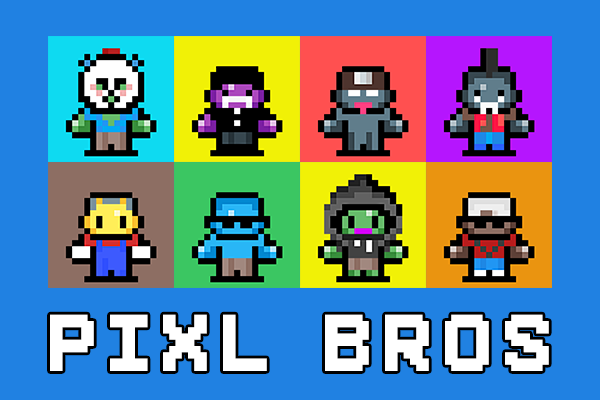
<style>
.page{position:relative;width:600px;height:400px;background:#2081e2}
.page>*{position:absolute;margin:0}
.t1{font:100px "Superstar";letter-spacing:0.1em;color:#ffffff}
</style>
<div class="page">
<p class="t1" style="left:50px;top:314px;width:499px;height:57px">Pixl BROS</p>
</div>
